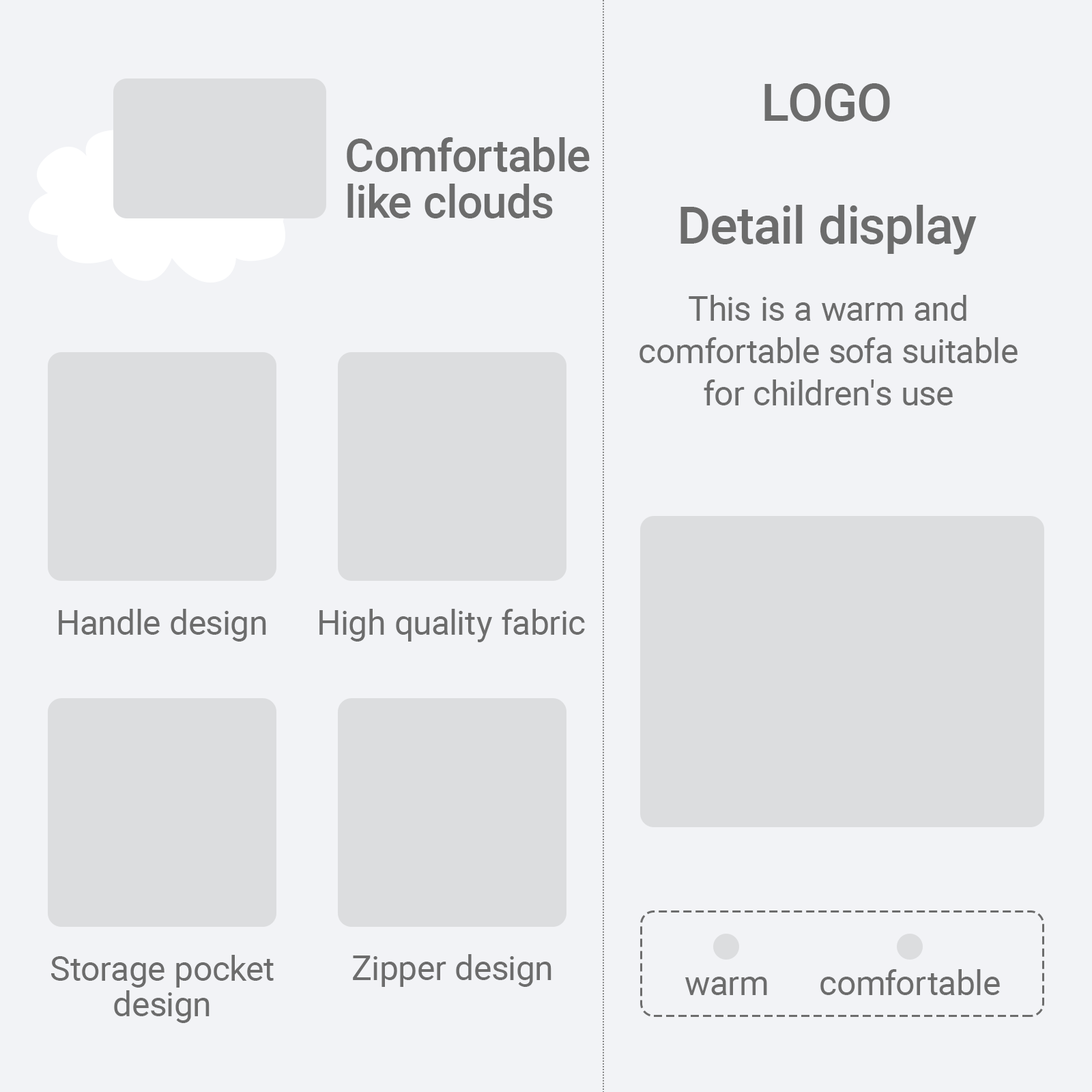
<style>
.page{position:relative;width:1092px;height:1092px;background:#f2f3f6}
.page>*{position:absolute;margin:0}
.t1{font:51.9px "Roboto-Medium";color:#6c6c6c}
.t2{font:45px/46.4px "Roboto-Medium";color:#6c6c6c}
.t3{font:34.1px/42.3px "Roboto-Regular";color:#6c6c6c}
.t4{font:34.1px "Roboto-Regular";color:#6c6c6c}
.t5{font:34.1px/35.5px "Roboto-Regular";color:#6c6c6c}
.t6{font:34.2px "Roboto-Regular";color:#6c6c6c}
</style>
<div class="page">
<p class="t1" style="left:764px;top:83px;width:126px;height:38px">LOGO</p>
<p class="t2" style="left:347px;top:137px;width:243px;height:81px">Comfortable<br>like clouds</p>
<p class="t1" style="left:680px;top:205px;width:297px;height:50px">Detail display</p>
<p class="t3" style="left:639px;top:295px;width:379px;height:110px;text-align:center">This is a warm and comfortable sofa suitable for children's use</p>
<p class="t4" style="left:59px;top:609px;width:207px;height:33px">Handle design</p>
<p class="t4" style="left:319px;top:609px;width:266px;height:33px">High quality fabric</p>
<p class="t5" style="left:51px;top:955px;width:223px;height:68px;text-align:center">Storage pocket<br>design</p>
<p class="t4" style="left:353px;top:954px;width:198px;height:33px">Zipper design</p>
<p class="t6" style="left:685px;top:977px;width:82px;height:18px">warm</p>
<p class="t6" style="left:820px;top:969px;width:180px;height:26px">comfortable</p>
</div>
